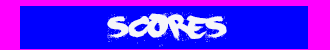
<style>
.page{position:relative;width:330px;height:50px;background:#0000ff}
.page>*{position:absolute;margin:0}
.t1{font:40px "PaintCans";color:#f5f5f9}
</style>
<div class="page">
<p class="t1" style="left:107px;top:12px;width:120px;height:35px">Scores</p>
</div>
